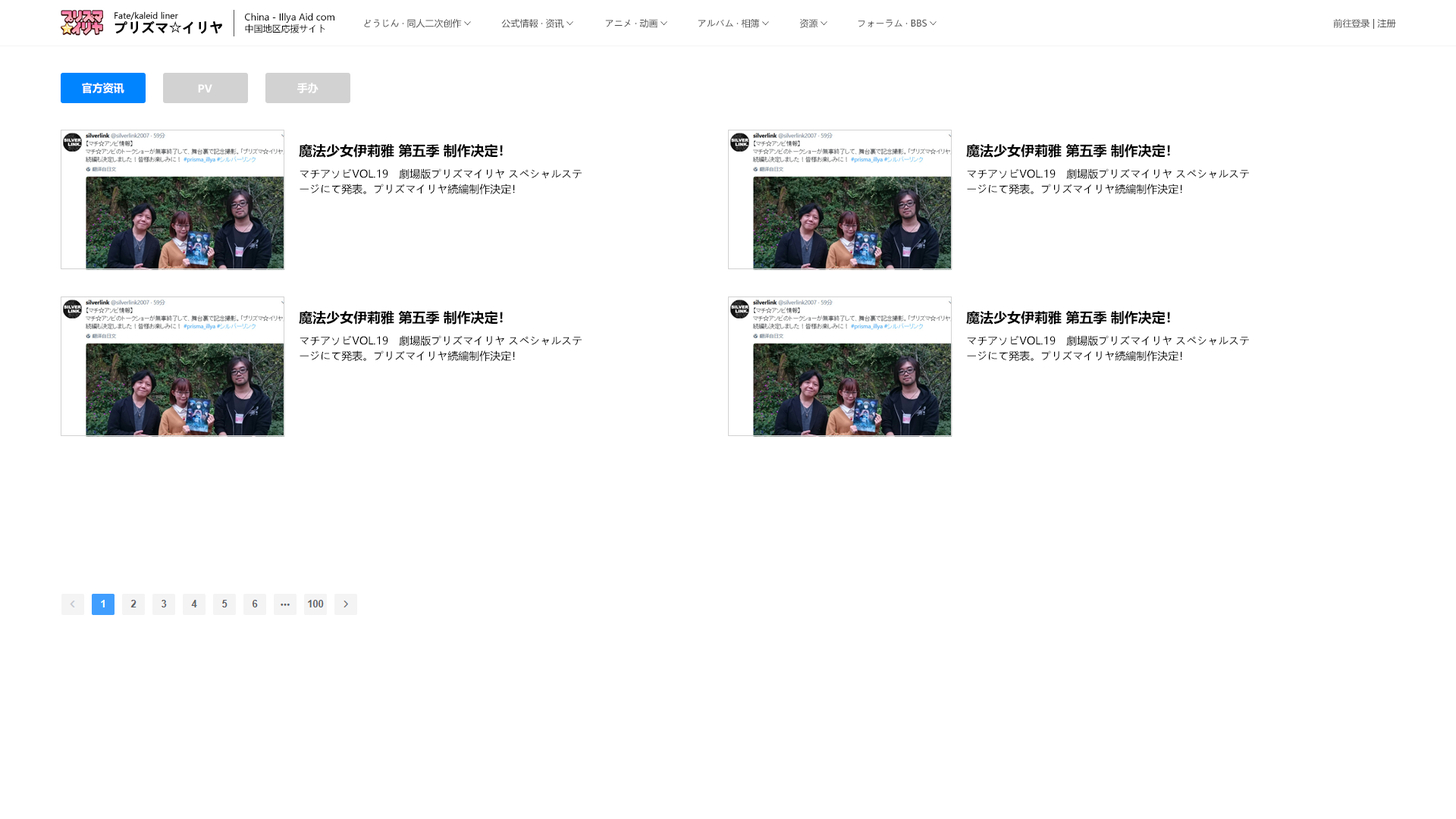
<style>
.page{position:relative;width:1456px;height:819px;background:#ffffff}
.page>*{position:absolute;margin:0}
.t1{font:8.3px "MicrosoftYaHeiUI";color:#000000}
.t2{font:9.1px "MicrosoftYaHeiUI";color:#000000}
.t3{font:13.6px "MicrosoftYaHeiUI-Bold";color:#000000}
.t4{font:13.6px "AdobeHeitiStd-Regular";color:#000000}
.t5{font:9.1px "MicrosoftYaHeiUI";color:#484848}
.t6{font:9.1px "MS-PGothic"}
.t7{font:10.6px "MicrosoftYaHeiUI-Bold";color:#ffffff}
.t8{font:10.6px/15.2px "MicrosoftYaHeiUI";color:#000000}
</style>
<div class="page">
<p class="t1" style="left:115px;top:11px;width:63px;height:9px">Fate/kaleid liner</p>
<p class="t2" style="left:245px;top:13px;width:89px;height:10px">China - Illya Aid com</p>
<p class="t3" style="left:115px;top:20px;width:107px;height:14px">プリズマ<span class="t4">☆</span>イリヤ</p>
<p class="t2" style="left:245px;top:24px;width:80px;height:9px">中国地区応援サイト</p>
<p class="t5" style="left:364px;top:19px;width:98px;height:9px">どうじん · 同人二次创作</p>
<p class="t6" style="left:464px;top:21px;width:7px;height:5px;rotate:90deg">&gt;</p>
<p class="t5" style="left:501px;top:18px;width:63px;height:10px">公式情報 · 资讯</p>
<p class="t6" style="left:566px;top:21px;width:7px;height:5px;rotate:90deg">&gt;</p>
<p class="t5" style="left:605px;top:19px;width:53px;height:9px">アニメ · 动画</p>
<p class="t6" style="left:660px;top:21px;width:7px;height:5px;rotate:90deg">&gt;</p>
<p class="t5" style="left:698px;top:19px;width:62px;height:9px">アルバム · 相簿</p>
<p class="t6" style="left:762px;top:21px;width:7px;height:5px;rotate:90deg">&gt;</p>
<p class="t5" style="left:799px;top:18px;width:19px;height:10px">资源</p>
<p class="t6" style="left:821px;top:21px;width:6px;height:5px;rotate:90deg">&gt;</p>
<p class="t5" style="left:858px;top:19px;width:69px;height:8px">フォーラム · BBS</p>
<p class="t6" style="left:930px;top:21px;width:7px;height:5px;rotate:90deg">&gt;</p>
<p class="t5" style="left:1333px;top:19px;width:63px;height:10px">前往登录 | 注册</p>
<p class="t7" style="left:82px;top:83px;width:42px;height:10px">官方资讯</p>
<p class="t7" style="left:198px;top:84px;width:14px;height:9px">PV</p>
<p class="t7" style="left:297px;top:83px;width:21px;height:10px">手办</p>
<p class="t3" style="left:299px;top:143px;width:204px;height:15px">魔法少女伊莉雅 第五季 制作决定！</p>
<p class="t3" style="left:966px;top:143px;width:204px;height:15px">魔法少女伊莉雅 第五季 制作决定！</p>
<p class="t8" style="left:300px;top:168px;width:282px;height:27px">マチアソビVOL.19　劇場版プリズマイリヤ スペシャルステージにて発表。プリズマイリヤ続編制作決定！</p>
<p class="t8" style="left:967px;top:168px;width:282px;height:27px">マチアソビVOL.19　劇場版プリズマイリヤ スペシャルステージにて発表。プリズマイリヤ続編制作決定！</p>
<p class="t3" style="left:299px;top:310px;width:204px;height:15px">魔法少女伊莉雅 第五季 制作决定！</p>
<p class="t3" style="left:966px;top:310px;width:204px;height:15px">魔法少女伊莉雅 第五季 制作决定！</p>
<p class="t8" style="left:300px;top:335px;width:282px;height:27px">マチアソビVOL.19　劇場版プリズマイリヤ スペシャルステージにて発表。プリズマイリヤ続編制作決定！</p>
<p class="t8" style="left:967px;top:335px;width:282px;height:27px">マチアソビVOL.19　劇場版プリズマイリヤ スペシャルステージにて発表。プリズマイリヤ続編制作決定！</p>
</div>
